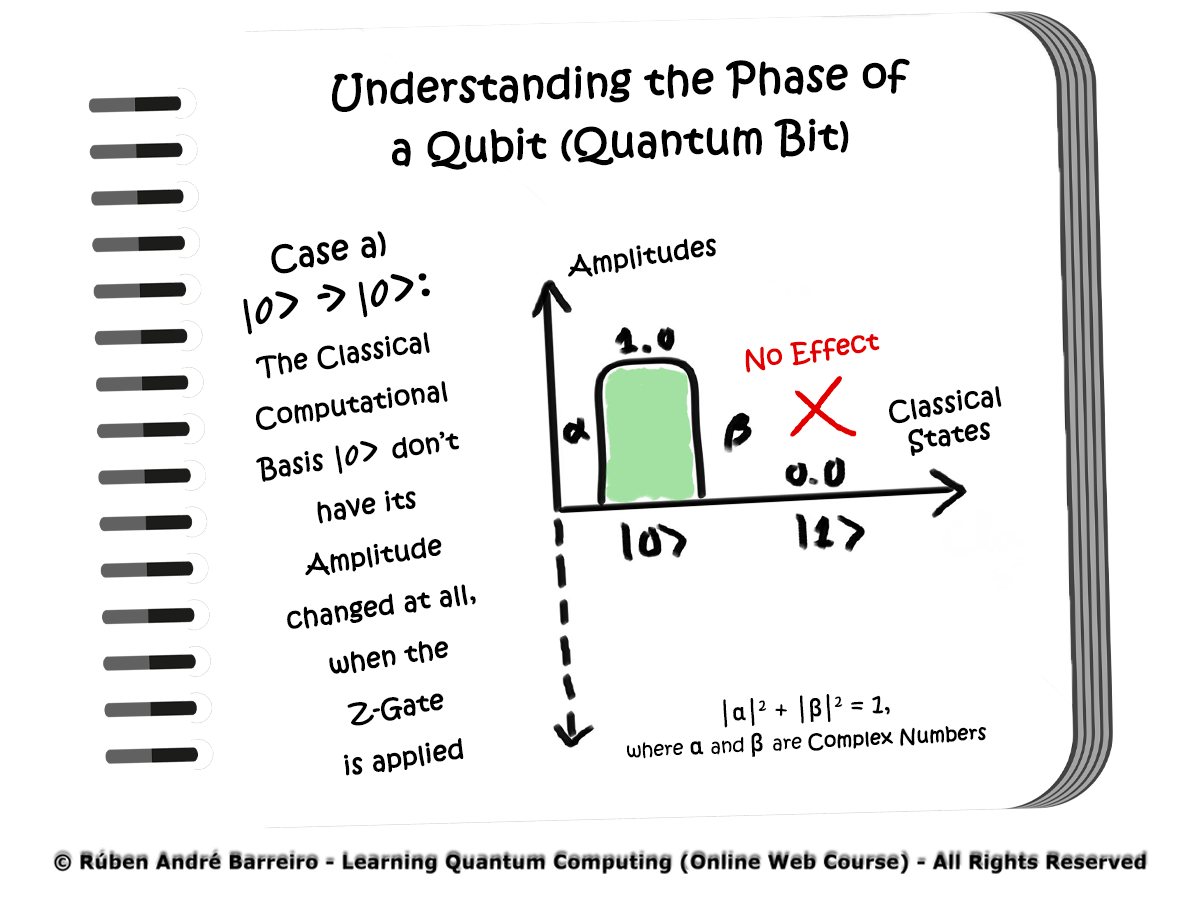
<style>
.page{position:relative;width:1200px;height:900px;background:#ffffff}
.page>*{position:absolute;margin:0}
.t1{font:40px "KristenITC-Regular";color:#000000;font-weight:bold}
.t2{font:25.5px/51px "KristenITC-Regular";color:#000000;font-weight:bold}
.t3{font:31.9px/51px "KristenITC-Regular";color:#000000;font-weight:bold}
.t4{font:51px/51px "FreestyleScript-Regular";color:#000000;font-weight:bold}
.t5{font:51px/51px "KristenITC-Regular";color:#000000}
.t6{font:51px/51px "KristenITC-Regular";letter-spacing:-0.2em;color:#000000}
.t7{font:38.3px/51px "FreestyleScript-Regular";color:#000000;font-weight:bold}
.t8{font:38.3px/51px "KristenITC-Regular";color:#000000}
.t9{font:25.5px "KristenITC-Regular";color:#000000;font-weight:bold}
.t10{font:25.5px "KristenITC-Regular";color:#e20000;font-weight:bold}
.t11{font:25.5px/31.9px "KristenITC-Regular";color:#000000;font-weight:bold}
.t12{font:19.1px/31.9px "KristenITC-Regular";color:#000000;font-weight:bold}
.t13{font:25.5px/31.9px "KristenITC-Regular";color:#000000}
.t14{font:25.5px/31.9px "Bahnschrift";color:#000000}
.t15{font:19.1px/31.9px "KristenITC-Regular";color:#000000}
</style>
<div class="page">
<p class="t1" style="left:332px;top:58px;width:578px;height:112px;rotate:-2deg">Understanding the Phase of a Qubit (Quantum Bit)</p>
<p class="t2" style="left:243px;top:231px;width:233px;height:545px;text-align:center;rotate:-8deg"><span class="t3">Case a)<br>|</span><span class="t4">0</span><span class="t5">&gt; </span><span class="t6">-&gt; </span><span class="t3">|</span><span class="t4">0</span><span class="t5">&gt;:<br></span>The Classical Computational Basis |<span class="t7">0</span><span class="t8">&gt; </span>don’t have its<br>Amplitude changed at all,<br>when the Z-Gate<br>is applied</p>
<p class="t9" style="left:568px;top:238px;width:148px;height:39px;rotate:-8deg">Amplitudes</p>
<p class="t10" style="left:745px;top:334px;width:135px;height:39px;rotate:-8deg">No Effect</p>
<p class="t11" style="left:889px;top:386px;width:113px;height:70px;text-align:center;rotate:-8deg">Classical<br>States</p>
<p class="t12" style="left:627px;top:694px;width:360px;height:65px;text-align:center;rotate:-3deg"><span class="t13">|</span><span class="t14">α</span><span class="t13">|2 + |</span><span class="t14">β</span><span class="t13">|2 = 1,<br></span><span class="t15">where </span><span class="t14">α </span><span class="t15">and </span><span class="t14">β </span><span class="t15">are </span>Complex Numbers</p>
</div>
